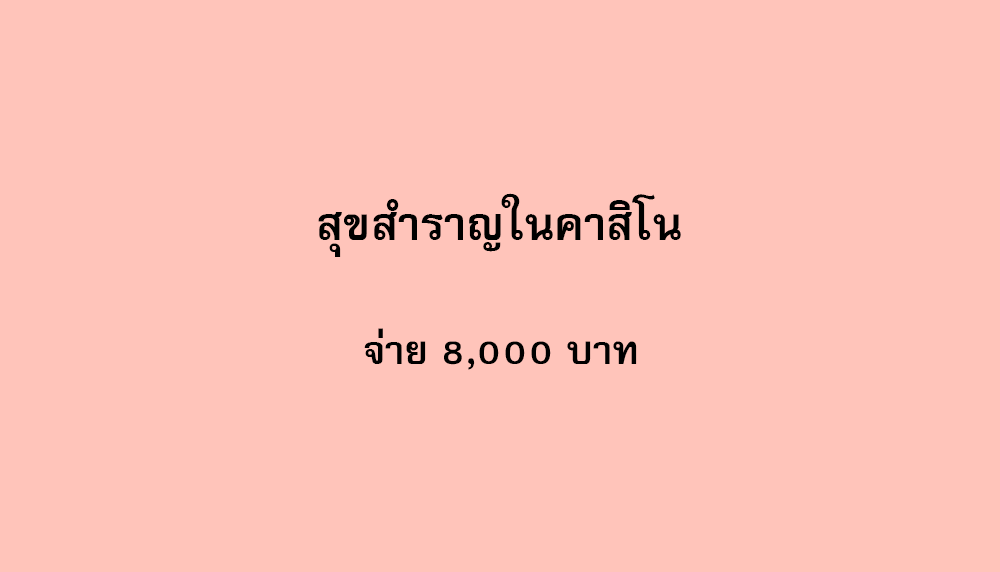
<style>
.page{position:relative;width:1000px;height:572px;background:#ffc4ba}
.page>*{position:absolute;margin:0}
.t1{font:64px "FreesiaUPCBold";color:#000000}
.t2{font:56px "FreesiaUPCBold";color:#000000}
</style>
<div class="page">
<p class="t1" style="left:318px;top:193px;width:363px;height:64px">สุขสำราญในคาสิโน</p>
<p class="t2" style="left:364px;top:328px;width:273px;height:42px">จ่าย 8,000 บาท</p>
</div>
